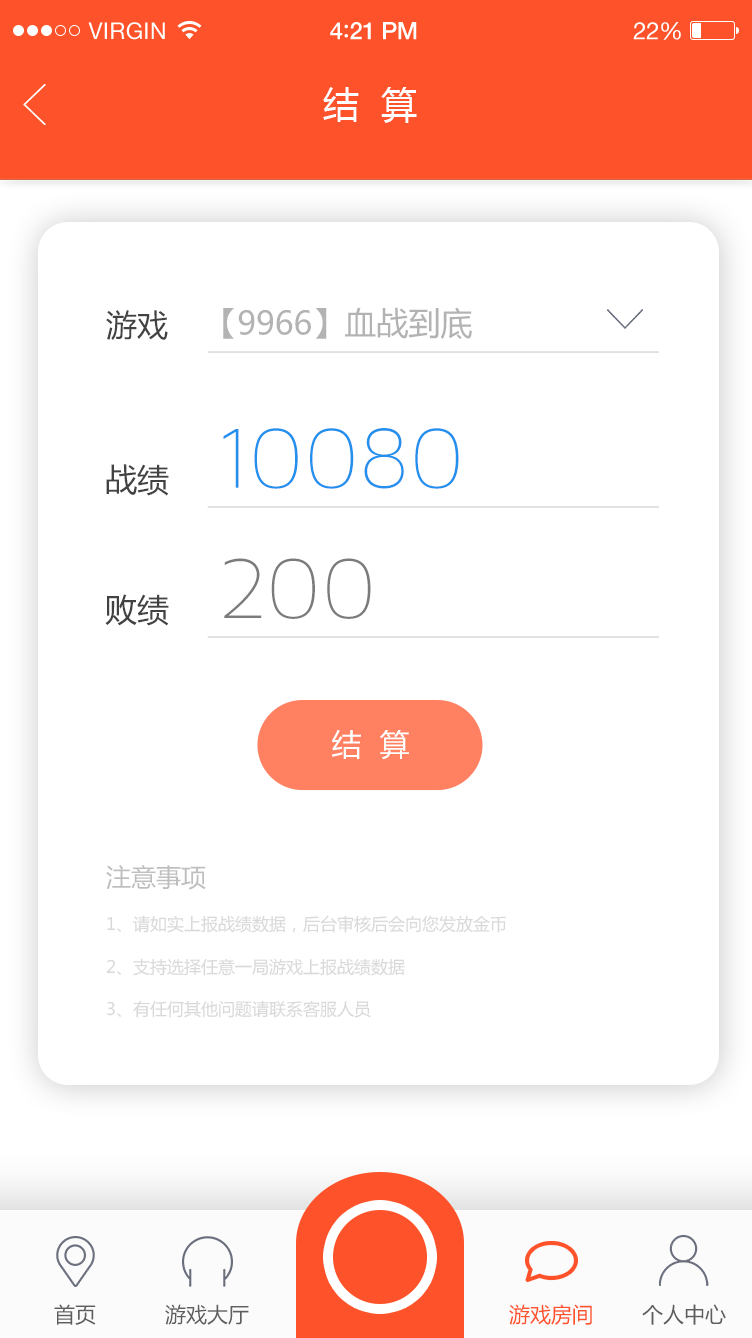
<style>
.page{position:relative;width:752px;height:1338px;background:#ffffff}
.page>*{position:absolute;margin:0}
.t1{font:23px "HelveticaNeue";letter-spacing:0.02em;color:#ffffff}
.t2{font:24px "HelveticaNeue-Medium";letter-spacing:-0.02em;color:#ffffff}
.t3{font:26px "Avenir-Medium";letter-spacing:-0.02em;color:#ffffff}
.t4{font:24px "HelveticaNeue";letter-spacing:-0.02em;color:#ffffff}
.t5{font:36px "MicrosoftYaHei";color:#ffffff}
.t6{font:31px "MicrosoftYaHei";color:#424242}
.t7{font:31.9px "MicrosoftYaHei";color:#b3b3b3}
.t8{font:94.9px "MavenProLight200-Regular";color:#2390ed}
.t9{font:32px "MicrosoftYaHei";color:#424242}
.t10{font:94.8px "MavenProLight200-Regular";color:#7b7b7b}
.t11{font:31.9px "MicrosoftYaHei";color:#424242}
.t12{font:30px "MicrosoftYaHei";color:#ffffff}
.t13{font:25px "MicrosoftYaHei";color:#bebebe}
.t14{font:17px "MicrosoftYaHei";color:#d9d9d9}
.t15{font:21px "MicrosoftYaHei";color:#5e5e5e}
.t16{font:21px "MicrosoftYaHei";color:#fe532a}
</style>
<div class="page">
<p class="t1" style="left:88px;top:22px;width:77px;height:18px">VIRGIN</p>
<p class="t2" style="left:330px;top:22px;width:87px;height:18px">4<span class="t3">:</span>21 PM</p>
<p class="t4" style="left:633px;top:22px;width:48px;height:18px">22%</p>
<p class="t5" style="left:323px;top:87px;width:94px;height:36px">结  算</p>
<p class="t6" style="left:106px;top:310px;width:62px;height:30px">游戏</p>
<p class="t7" style="left:223px;top:307px;width:249px;height:32px">【9966】血战到底</p>
<p class="t8" style="left:223px;top:428px;width:236px;height:61px">10080</p>
<p class="t9" style="left:106px;top:464px;width:63px;height:32px">战绩</p>
<p class="t10" style="left:224px;top:558px;width:147px;height:61px">200</p>
<p class="t11" style="left:105px;top:594px;width:64px;height:32px">败绩</p>
<p class="t12" style="left:331px;top:729px;width:78px;height:31px">结  算</p>
<p class="t13" style="left:106px;top:865px;width:100px;height:25px">注意事项</p>
<p class="t14" style="left:107px;top:915px;width:399px;height:18px">1、请如实上报战绩数据，后台审核后会向您发放金币</p>
<p class="t14" style="left:106px;top:958px;width:299px;height:18px">2、支持选择任意一局游戏上报战绩数据</p>
<p class="t14" style="left:107px;top:1000px;width:264px;height:18px">3、有任何其他问题请联系客服人员</p>
<p class="t15" style="left:54px;top:1304px;width:42px;height:21px">首页</p>
<p class="t15" style="left:165px;top:1304px;width:84px;height:21px">游戏大厅</p>
<p class="t16" style="left:509px;top:1304px;width:83px;height:21px">游戏房间</p>
<p class="t15" style="left:642px;top:1304px;width:84px;height:21px">个人中心</p>
</div>
